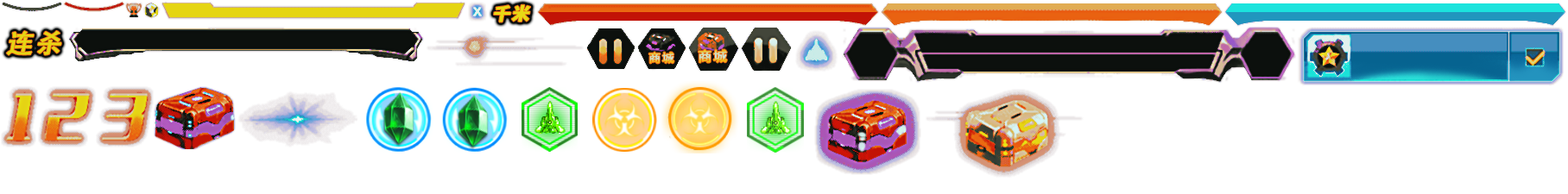
<style>
.page{position:relative;width:1568px;height:194px;background:#ffffff}
.page>*{position:absolute;margin:0}
.t1{font:17.4px "SourceHanSansCN-Heavy";letter-spacing:0.08em;color:#e8d914;font-weight:bold;font-style:italic}
.t2{font:25.9px "AdobeHeitiStd-Regular";letter-spacing:0.08em;color:#e5d514;font-weight:bold;font-style:italic}
.t3{font:11.8px "SourceHanSansCN-Medium";letter-spacing:0.08em;font-weight:bold}
.t4{font:13.8px "SourceHanSansCN-Medium";letter-spacing:0.08em;font-weight:bold}
</style>
<div class="page">
<p class="t1" style="left:494px;top:4px;width:37px;height:18px">千米</p>
<p class="t2" style="left:6px;top:30px;width:55px;height:25px">连杀</p>
<p class="t3" style="left:648px;top:52px;width:26px;height:12px">商城</p>
<p class="t4" style="left:698px;top:49px;width:29px;height:14px">商城</p>
</div>
